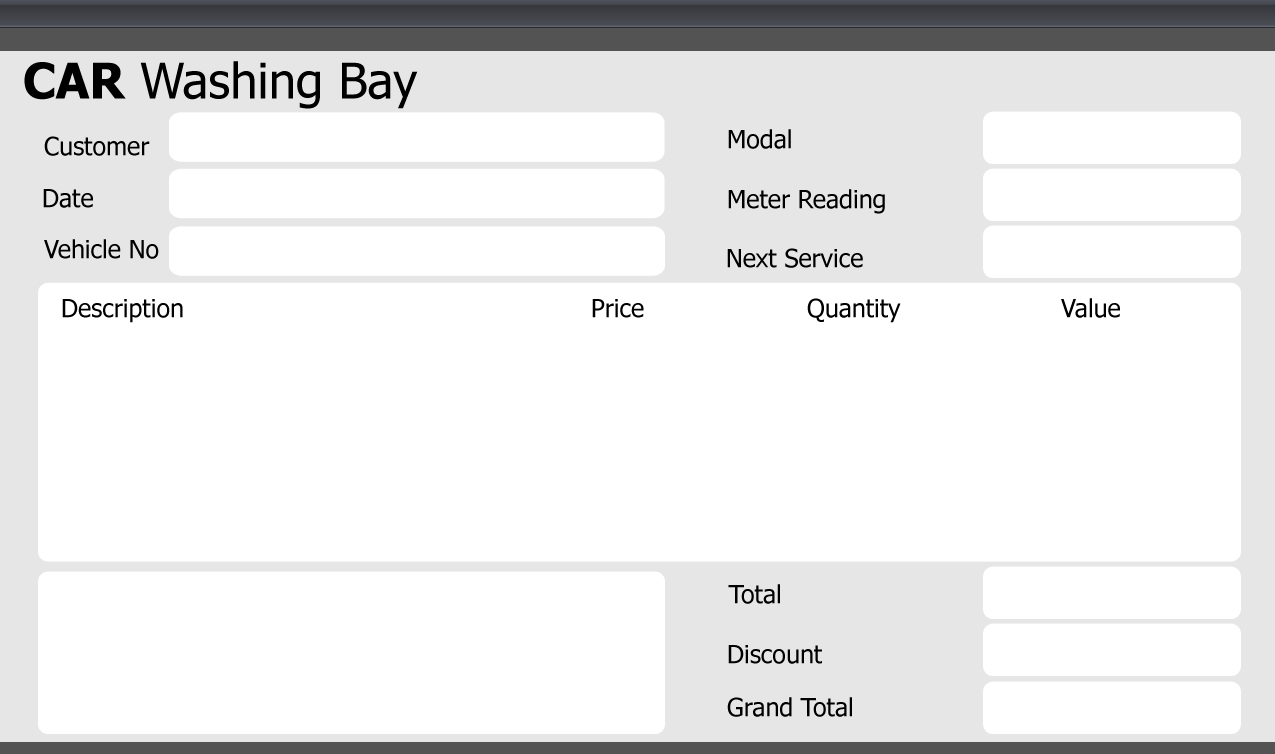
<style>
.page{position:relative;width:1275px;height:754px;background:#ffffff}
.page>*{position:absolute;margin:0}
.t1{font:49px "Tahoma";color:#000000}
.t2{font:49px "Tahoma-Bold";color:#000000}
.t3{font:25px "Tahoma";color:#000000}
</style>
<div class="page">
<p class="t1" style="left:24px;top:61px;width:394px;height:48px"><span class="t2">CAR</span> Washing Bay</p>
<p class="t3" style="left:44px;top:136px;width:106px;height:20px">Customer</p>
<p class="t3" style="left:728px;top:129px;width:63px;height:20px">Modal</p>
<p class="t3" style="left:43px;top:189px;width:50px;height:19px">Date</p>
<p class="t3" style="left:728px;top:189px;width:157px;height:25px">Meter Reading</p>
<p class="t3" style="left:44px;top:239px;width:115px;height:20px">Vehicle No</p>
<p class="t3" style="left:727px;top:248px;width:136px;height:20px">Next Service</p>
<p class="t3" style="left:62px;top:299px;width:121px;height:24px">Description</p>
<p class="t3" style="left:592px;top:299px;width:52px;height:19px">Price</p>
<p class="t3" style="left:807px;top:298px;width:94px;height:25px">Quantity</p>
<p class="t3" style="left:1061px;top:298px;width:59px;height:20px">Value</p>
<p class="t3" style="left:728px;top:584px;width:52px;height:20px">Total</p>
<p class="t3" style="left:728px;top:645px;width:94px;height:19px">Discount</p>
<p class="t3" style="left:727px;top:697px;width:125px;height:20px">Grand Total</p>
</div>
